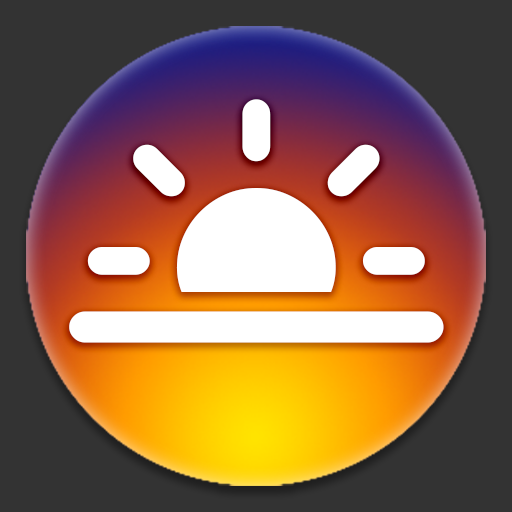
<style>
.page{position:relative;width:512px;height:512px;background:#333333}
.page>*{position:absolute;margin:0}
.t1{font:299px "SFPro-Semibold";color:#ffffff}
</style>
<div class="page">
<p class="t1" style="left:69px;top:99px;width:375px;height:244px">􀻟</p>
</div>
